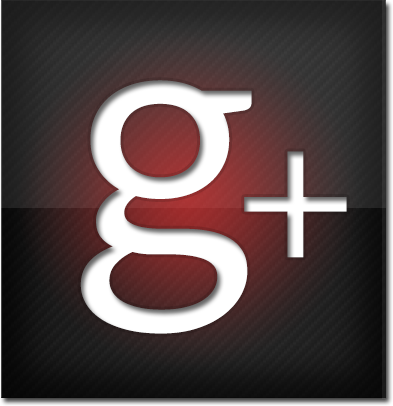
<style>
.page{position:relative;width:393px;height:406px}
.page>*{position:absolute;margin:0}
.t1{font:362.5px "Lato-Regular";color:#ffffff}
.t2{font:212.5px "Lato-Regular";color:#ffffff}
</style>
<div class="page">
<p class="t1" style="left:80px;top:80px;width:172px;height:254px">g</p>
<p class="t2" style="left:244px;top:151px;width:103px;height:107px">+</p>
</div>
